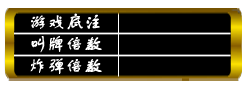
<style>
.page{position:relative;width:246px;height:90px;background:#000000}
.page>*{position:absolute;margin:0}
.t1{font:18px "FZSTK--GBK1-0";color:#ffffff;font-weight:bold}
</style>
<div class="page">
<p class="t1" style="left:31px;top:13px;width:69px;height:17px">游戏底注</p>
<p class="t1" style="left:31px;top:36px;width:71px;height:17px">叫牌倍数</p>
<p class="t1" style="left:30px;top:58px;width:72px;height:16px">炸弹倍数</p>
</div>
